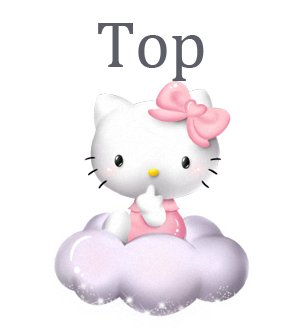
<style>
.page{position:relative;width:300px;height:335px;background:#ffffff}
.page>*{position:absolute;margin:0}
.t1{font:66px "Cambria";color:#5c5d67}
</style>
<div class="page">
<p class="t1" style="left:98px;top:23px;width:106px;height:58px">Top</p>
</div>
